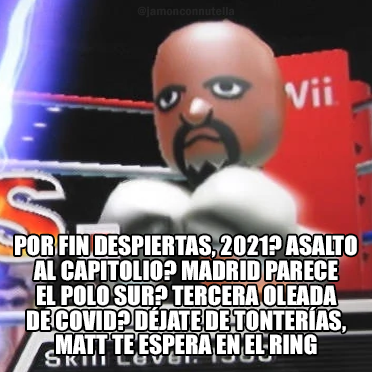
<style>
.page{position:relative;width:372px;height:372px}
.page>*{position:absolute;margin:0}
.t1{font:12px "FranklinGothic-Demi";color:#242424}
.t2{font:24.2px "Impact";color:#ffffff;scale:1.04 1}
</style>
<div class="page">
<p class="t1" style="left:137px;top:6px;width:97px;height:12px">@jamonconnutella</p>
<p class="t2" style="left:15px;top:235px;width:342px;height:120px;text-align:center">POR FIN DESPIERTAS, 2021? ASALTO<br>AL CAPITOLIO? MADRID PARECE<br>EL POLO SUR? TERCERA OLEADA<br>DE COVID? DÉJATE DE TONTERÍAS,<br>MATT TE ESPERA EN EL RING</p>
</div>
